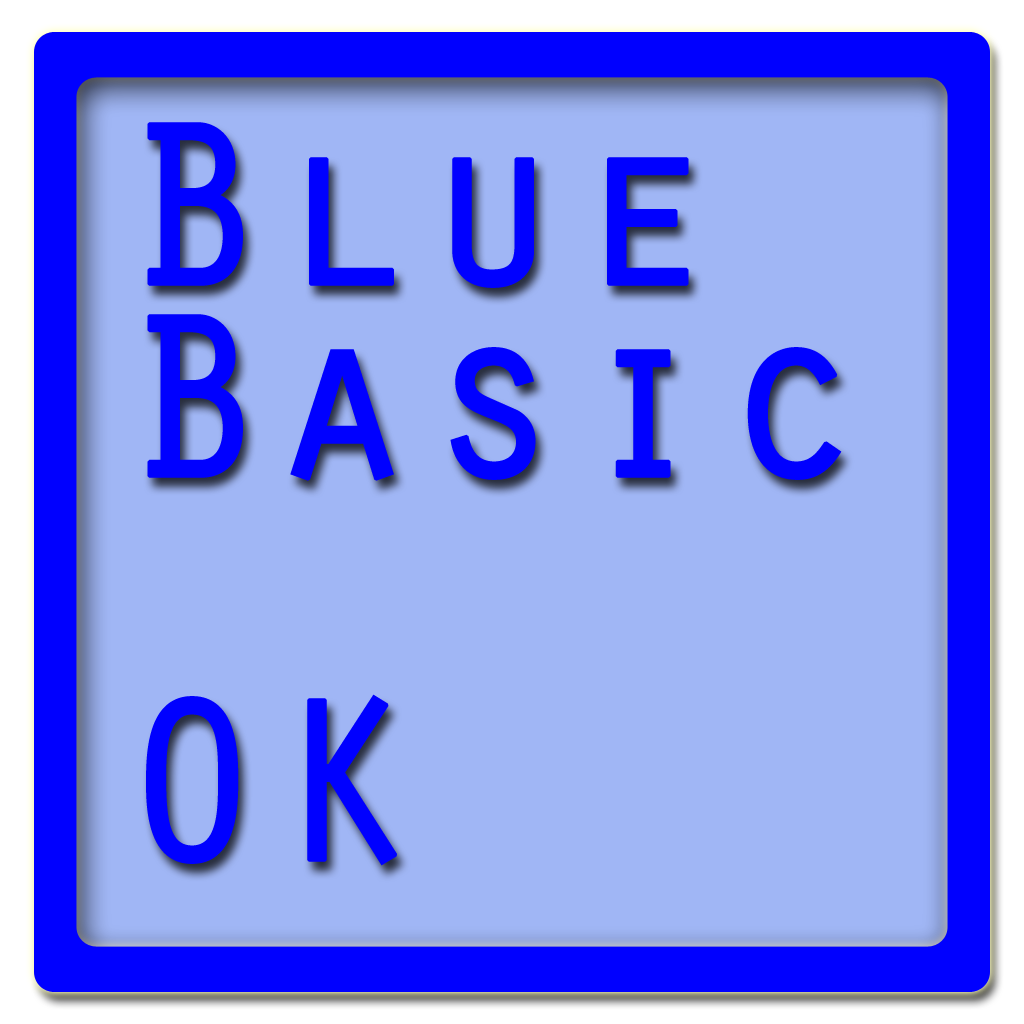
<style>
.page{position:relative;width:1024px;height:1024px;background:#a0b6f5}
.page>*{position:absolute;margin:0}
.t1{font:240px/192px "OratorStd";color:#0000ff;font-weight:bold}
</style>
<div class="page">
<p class="t1" style="left:146px;top:122px;width:696px;height:744px">Blue<br>Basic<br><br>OK</p>
</div>
